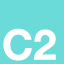
<style>
.page{position:relative;width:64px;height:64px;background:#6adbd9}
.page>*{position:absolute;margin:0}
.t1{font:42.1px "HelveticaNeueBold";color:#ffffff}
</style>
<div class="page">
<p class="t1" style="left:3px;top:28px;width:53px;height:33px">C2</p>
</div>
